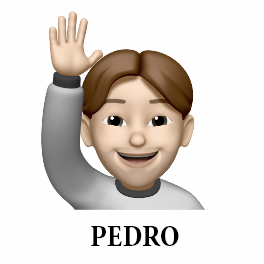
<style>
.page{position:relative;width:264px;height:264px;background:#fefefe}
.page>*{position:absolute;margin:0}
.t1{font:30px "MinionPro-BoldCn";color:#000000}
</style>
<div class="page">
<p class="t1" style="left:91px;top:226px;width:88px;height:20px">PEDRO</p>
</div>
